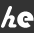
<style>
.page{position:relative;width:34px;height:33px;background:#333333}
.page>*{position:absolute;margin:0}
.t1{font:32px "HarlowSolid";letter-spacing:0.02em;color:#ffffff}
.t2{font:32px "Bauhaus93";letter-spacing:0.02em;color:#ffffff}
</style>
<div class="page">
<p class="t1" style="left:1px;top:6px;width:33px;height:22px">h<span class="t2">e</span></p>
</div>
